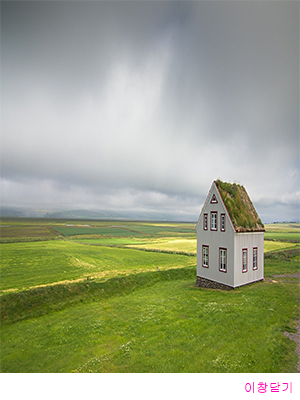
<style>
.page{position:relative;width:300px;height:400px}
.page>*{position:absolute;margin:0}
.t1{font:12.5px "Gulim";color:#ff00b4}
</style>
<div class="page">
<p class="t1" style="left:245px;top:382px;width:47px;height:11px">이창닫기</p>
</div>
